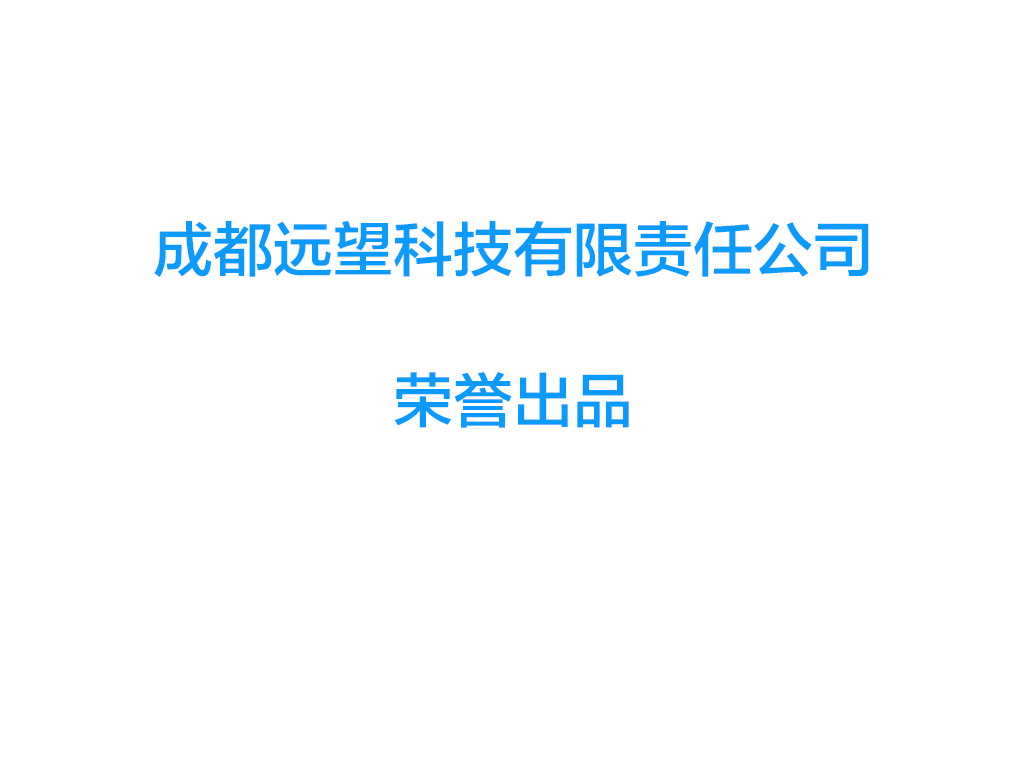
<style>
.page{position:relative;width:1024px;height:768px;background:#ffffff}
.page>*{position:absolute;margin:0}
.t1{font:59.6px "FZLTZHK--GBK1-0";color:#0b9afe}
</style>
<div class="page">
<p class="t1" style="left:154px;top:221px;width:715px;height:56px">成都远望科技有限责任公司</p>
<p class="t1" style="left:394px;top:372px;width:235px;height:56px">荣誉出品</p>
</div>
